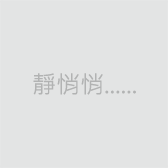
<style>
.page{position:relative;width:168px;height:168px;background:#e3e4e4}
.page>*{position:absolute;margin:0}
.t1{font:24px "MicrosoftJhengHeiRegular";color:#b2b3b3}
</style>
<div class="page">
<p class="t1" style="left:33px;top:73px;width:103px;height:22px">靜悄悄......</p>
</div>
